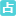
<style>
.page{position:relative;width:16px;height:16px;background:#4fd1d9}
.page>*{position:absolute;margin:0}
.t1{font:12.4px "MicrosoftYaHei-Bold";color:#ffffff}
</style>
<div class="page">
<p class="t1" style="left:2px;top:2px;width:12px;height:11px">占</p>
</div>
